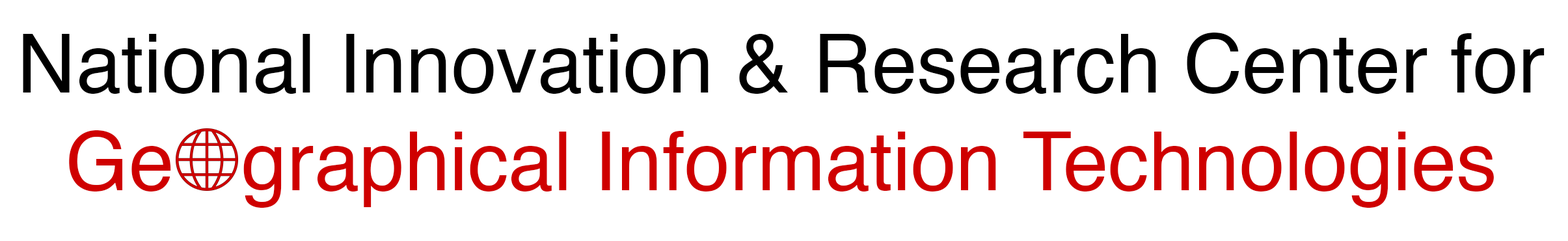
<style>
.page{position:relative;width:1568px;height:241px;background:#ffffff}
.page>*{position:absolute;margin:0}
.t1{font:81.3px "Helvetica";color:#000000}
.t2{font:81.3px "Helvetica";color:#cf0000}
</style>
<div class="page">
<p class="t1" style="left:23px;top:33px;width:1522px;height:175px;text-align:center">National Innovation &amp; Research Center for<br><span class="t2">Ge   graphical Information Technologies</span></p>
</div>
